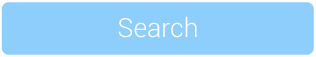
<style>
.page{position:relative;width:316px;height:57px;background:#8ecefd}
.page>*{position:absolute;margin:0}
.t1{font:26.5px "Roboto-Light";color:#ffffff}
</style>
<div class="page">
<p class="t1" style="left:118px;top:16px;width:79px;height:22px">Search</p>
</div>
